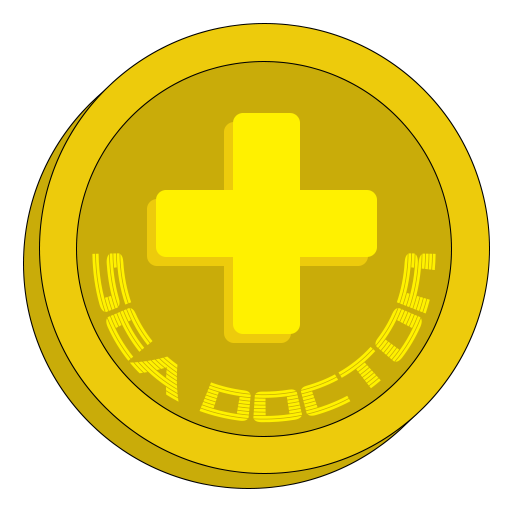
<style>
.page{position:relative;width:512px;height:512px;background:#ffffff}
.page>*{position:absolute;margin:0}
.t1{font:43.6px "AlienEncounters";color:#fff200}
</style>
<div class="page">
<p class="t1" style="left:92px;top:253px;width:344px;height:170px">sea Doctor</p>
</div>
